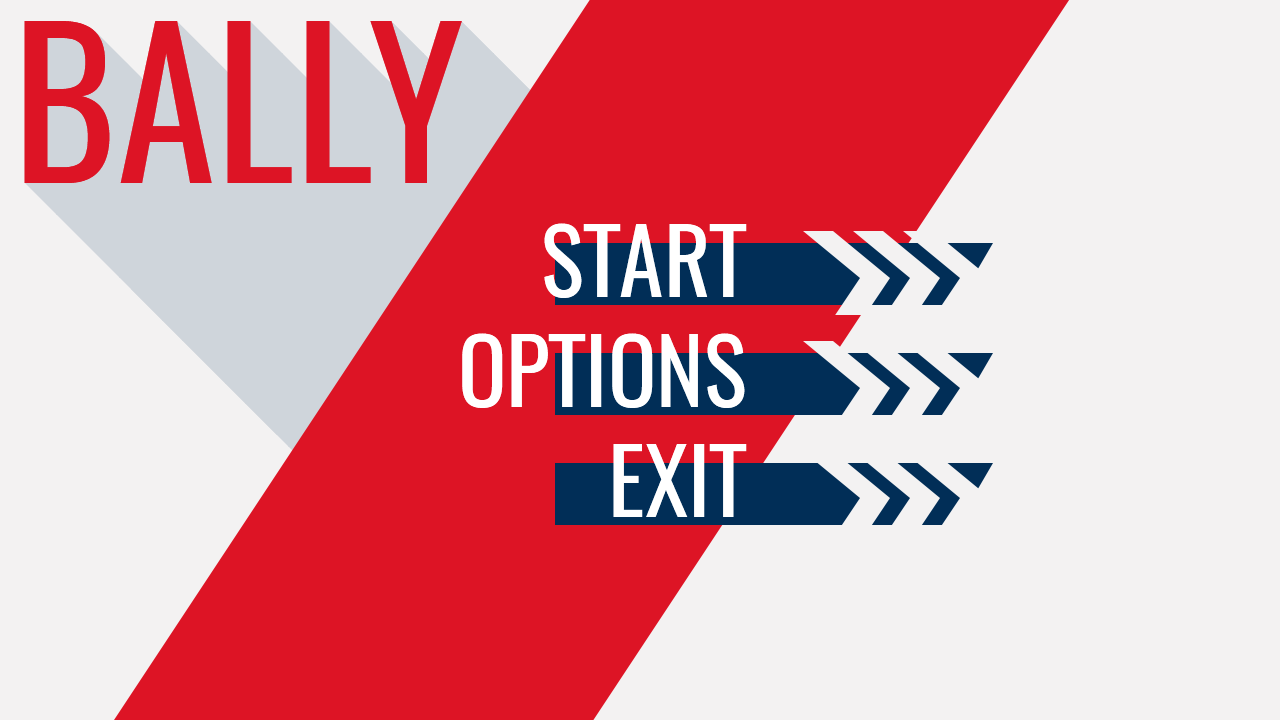
<style>
.page{position:relative;width:1280px;height:720px;background:#f3f2f2}
.page>*{position:absolute;margin:0}
.t1{font:200px "Oswald-Regular";color:#dd1425}
.t2{font:90px "Oswald-Regular";color:#ffffff}
</style>
<div class="page">
<p class="t1" style="left:24px;top:21px;width:438px;height:162px">BALLY</p>
<p class="t2" style="left:544px;top:223px;width:203px;height:75px">START</p>
<p class="t2" style="left:462px;top:333px;width:283px;height:75px">OPTIONS</p>
<p class="t2" style="left:613px;top:444px;width:134px;height:73px">EXIT</p>
</div>
